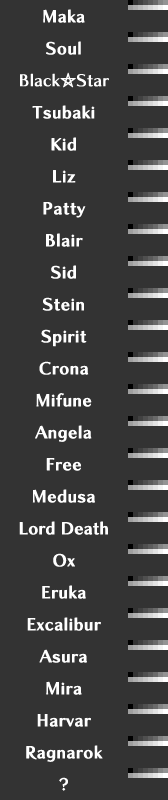
<style>
.page{position:relative;width:168px;height:800px;background:#333333}
.page>*{position:absolute;margin:0}
.t1{font:16px/32px "ChiaroStd-B";letter-spacing:0.025em;color:#ffffff;font-weight:bold}
.t2{font:16px/32px "ChiaroStd-B";letter-spacing:0.025em;color:#ffffff}
.t3{font:16px/32px "ChiaroStd-B";letter-spacing:0.01em;color:#ffffff}
.t4{font:16px/32px "ChiaroStd-B";letter-spacing:-0.1em;color:#ffffff}
.t5{font:20px/32px "SegoeUISymbol";letter-spacing:-0.12em;color:#ffffff;font-weight:bold}
.t6{font:16px/32px "ChiaroStd-B";color:#ffffff;font-weight:bold}
</style>
<div class="page">
<p class="t1" style="left:19px;top:9px;width:90px;height:782px;text-align:center">Maka<br>Soul<br><span class="t2">B</span><span class="t3">lac</span><span class="t4">k</span><span class="t5">⛤</span><span class="t3">St</span><span class="t2">ar<br></span>Tsubaki<br>Kid<br>Liz<br>Patty<br>Blair<br>Sid<br>Stein<br>Spirit<br>Crona<br>Mifune<br>Angela<br>Free<br>Medusa<br><span class="t6">Lord Death<br></span>Ox<br>Eruka<br>Excalibur<br>Asura<br>Mira<br>Harvar<br>Ragnarok<br>?</p>
</div>
